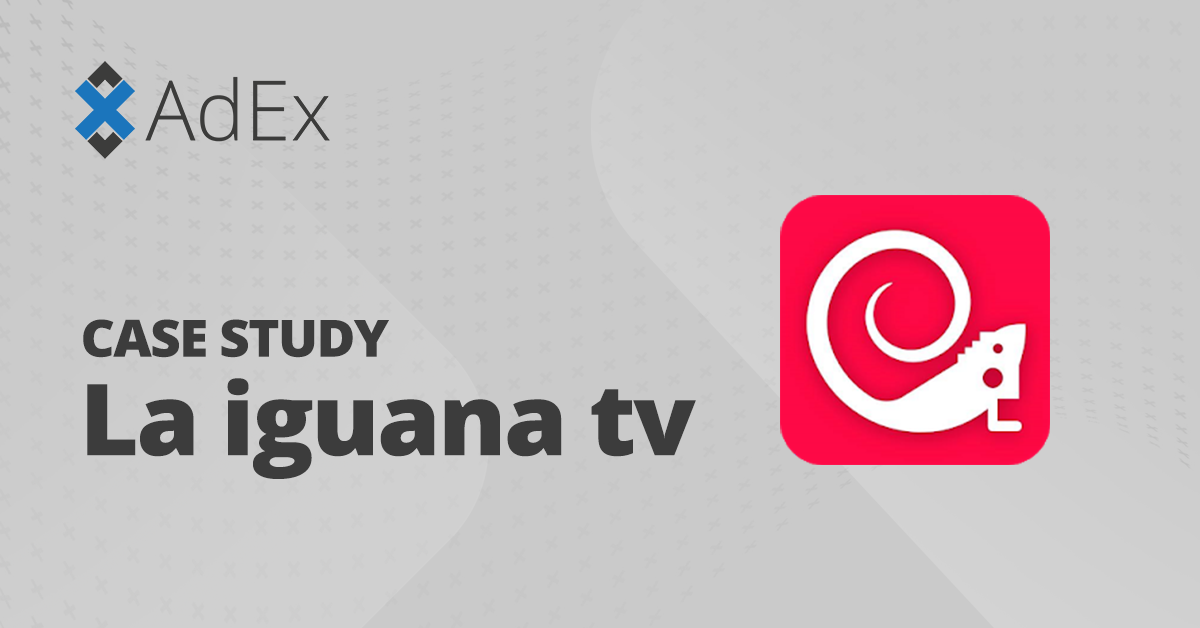
<style>
.page{position:relative;width:1200px;height:628px;background:#cacaca}
.page>*{position:absolute;margin:0}
.t1{font:51.1px "OpenSans-Extrabold";letter-spacing:-0.025em;color:#3c3c3c;text-transform:uppercase;scale:1.03 1}
.t2{font:99.1px "OpenSans-Extrabold";letter-spacing:-0.025em;color:#3c3c3c;scale:1.03 1}
</style>
<div class="page">
<p class="t1" style="left:83px;top:319px;width:306px;height:39px">case study</p>
<p class="t2" style="left:87px;top:378px;width:609px;height:101px">La iguana tv</p>
</div>
